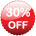
<style>
.page{position:relative;width:36px;height:36px;background:#ffffff}
.page>*{position:absolute;margin:0}
.t1{font:12px "ArialRoundedMTBold";color:#ffffff}
.t2{font:10px "ArialRoundedMTBold";color:#ffffff}
</style>
<div class="page">
<p class="t1" style="left:6px;top:7px;width:24px;height:22px;text-align:center">30%<br><span class="t2">OFF</span></p>
</div>
